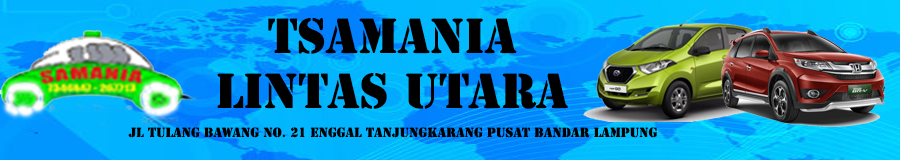
<style>
.page{position:relative;width:900px;height:160px}
.page>*{position:absolute;margin:0}
.t1{font:45.8px "StencilStd";color:#000000}
.t2{font:12.5px "StencilStd";color:#000000}
</style>
<div class="page">
<p class="t1" style="left:217px;top:18px;width:351px;height:91px;text-align:center">TSAMANIA<br>LINTAS UTARA</p>
<p class="t2" style="left:128px;top:127px;width:529px;height:11px">Jl Tulang bawang no. 21 enggal tanjungkarang pusat bandar lampung</p>
</div>
